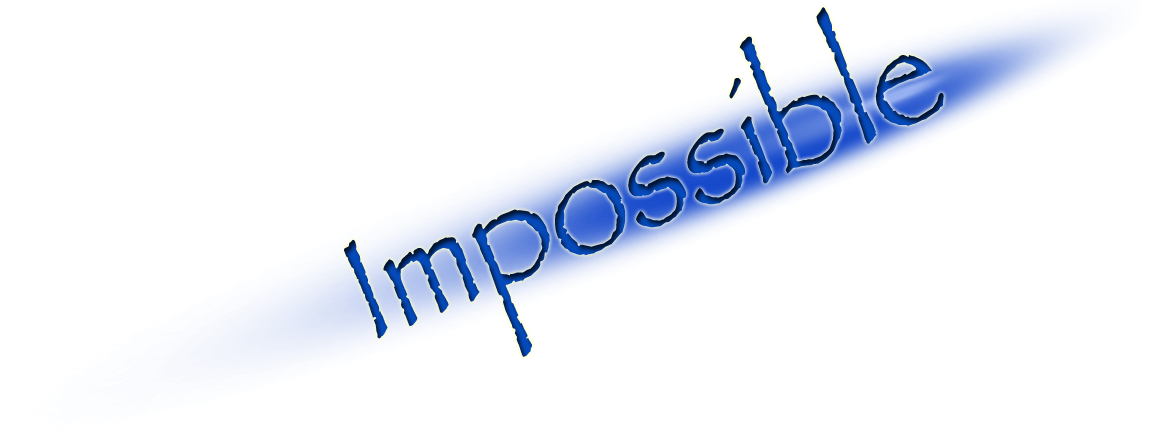
<style>
.page{position:relative;width:1153px;height:433px;background:#ffffff}
.page>*{position:absolute;margin:0}
.t1{font:150px "Papyrus-Condensed";scale:1.3 1}
</style>
<div class="page">
<p class="t1" style="left:344px;top:7px;width:600px;height:350px;rotate:-22deg">Impossible</p>
</div>
